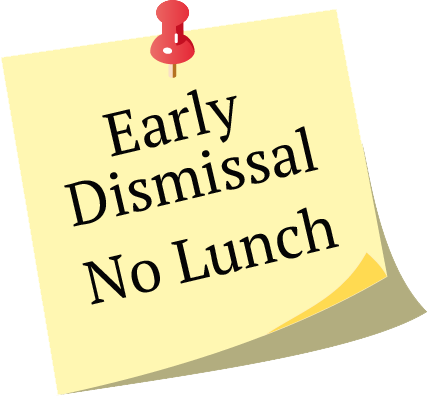
<style>
.page{position:relative;width:428px;height:396px;background:#fff7b2}
.page>*{position:absolute;margin:0}
.t1{font:60px/60px "PTSerif-Regular";color:#050505}
.t2{font:60px/80px "PTSerif-Regular";color:#050505}
</style>
<div class="page">
<p class="t1" style="left:64px;top:89px;width:275px;height:216px;text-align:center;rotate:-13deg">Early <br>Dismissal<br><span class="t2">No Lunch</span></p>
</div>
